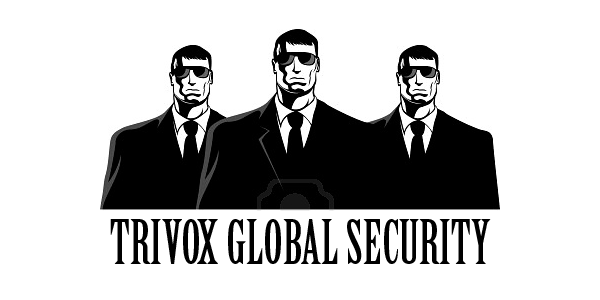
<style>
.page{position:relative;width:600px;height:300px;background:#ffffff}
.page>*{position:absolute;margin:0}
.t1{font:60px "BirchStd";color:#000000}
</style>
<div class="page">
<p class="t1" style="left:110px;top:219px;width:381px;height:45px">TRIVOX GLOBAL SECURITY</p>
</div>
